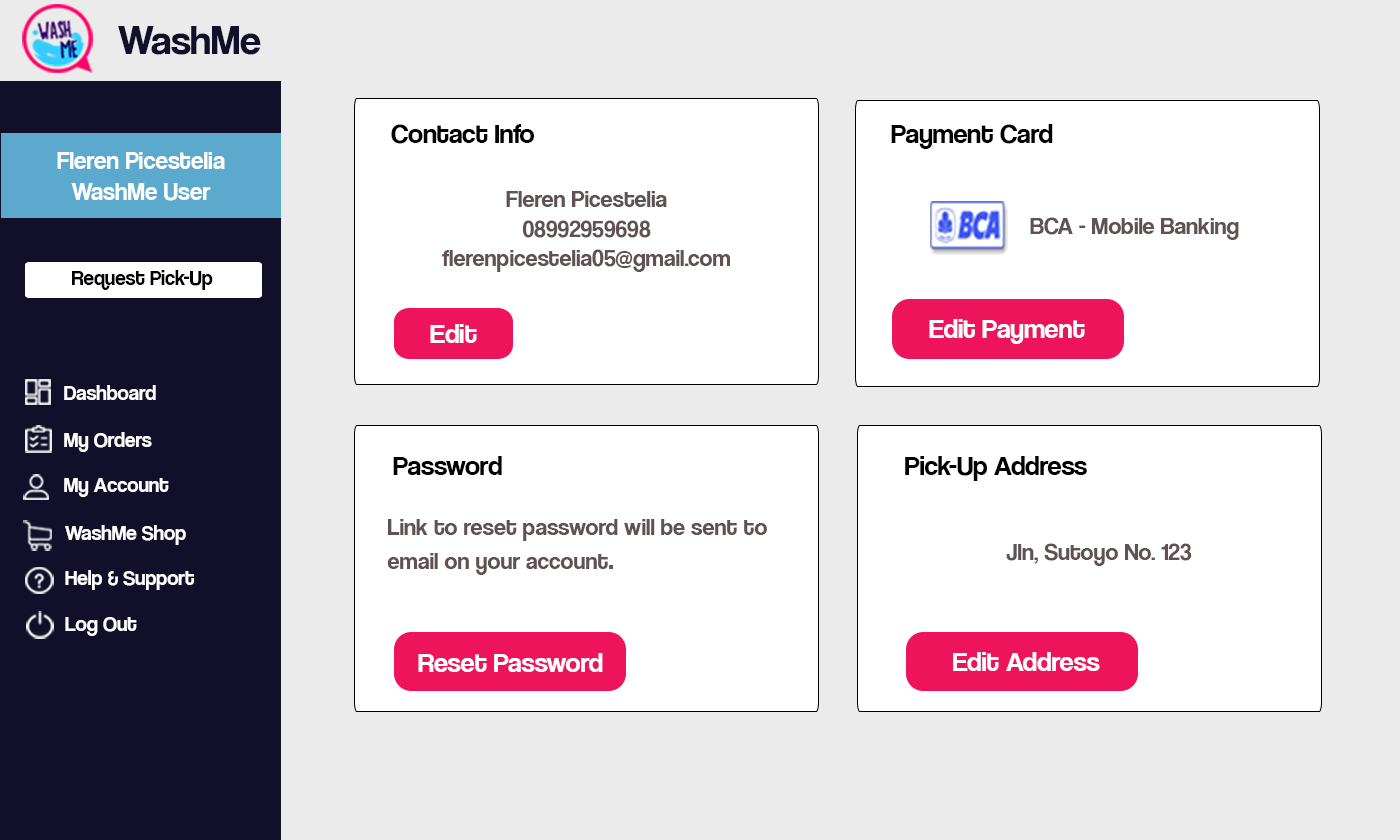
<style>
.page{position:relative;width:1400px;height:840px;background:#ffffff}
.page>*{position:absolute;margin:0}
.t1{font:42px "CoolveticaRg-Regular";color:#120f2b}
.t2{font:28px "CoolveticaRg-Regular";color:#000000}
.t3{font:25.2px "CoolveticaRg-Regular";color:#ffffff}
.t4{font:24.5px "CoolveticaRg-Regular";color:#605252}
.t5{font:21px "CoolveticaRg-Regular";color:#000000}
.t6{font:28px "CoolveticaRg-Regular";color:#ffffff}
.t7{font:21px "CoolveticaRg-Regular";color:#ffffff}
.t8{font:28px "CoolveticaRg-Regular";color:#605252}
.t9{font:27.9px "CoolveticaRg-Regular";color:#ffffff}
</style>
<div class="page">
<p class="t1" style="left:118px;top:26px;width:143px;height:29px">WashMe</p>
<p class="t2" style="left:391px;top:124px;width:143px;height:20px">Contact Info</p>
<p class="t2" style="left:891px;top:124px;width:162px;height:25px">Payment Card</p>
<p class="t3" style="left:57px;top:152px;width:168px;height:49px;text-align:center">Fleren Picestelia<br>WashMe User</p>
<p class="t4" style="left:442px;top:191px;width:288px;height:81px;text-align:center">Fleren Picestelia<br>08992959698<br>flerenpicestelia05@gmail.com</p>
<p class="t4" style="left:1030px;top:217px;width:209px;height:23px">BCA - Mobile Banking</p>
<p class="t5" style="left:72px;top:270px;width:141px;height:20px">Request Pick-Up</p>
<p class="t6" style="left:430px;top:324px;width:47px;height:19px">Edit</p>
<p class="t6" style="left:929px;top:319px;width:156px;height:25px">Edit Payment</p>
<p class="t7" style="left:64px;top:385px;width:92px;height:15px">Dashboard</p>
<p class="t7" style="left:64px;top:432px;width:88px;height:20px">My Orders</p>
<p class="t2" style="left:393px;top:456px;width:109px;height:19px">Password</p>
<p class="t2" style="left:905px;top:456px;width:182px;height:25px">Pick-Up Address</p>
<p class="t7" style="left:64px;top:478px;width:105px;height:19px">My Account</p>
<p class="t4" style="left:387px;top:519px;width:380px;height:56px">Link to reset password will be sent to <br>email on your account<span class="t8">.</span></p>
<p class="t7" style="left:65px;top:525px;width:121px;height:20px">WashMe Shop</p>
<p class="t4" style="left:1006px;top:543px;width:186px;height:23px">Jln, Sutoyo No. 123</p>
<p class="t7" style="left:65px;top:570px;width:129px;height:20px">Help &amp; Support</p>
<p class="t7" style="left:65px;top:617px;width:72px;height:19px">Log Out</p>
<p class="t6" style="left:418px;top:653px;width:185px;height:19px">Reset Password</p>
<p class="t9" style="left:953px;top:652px;width:147px;height:19px">Edit Address</p>
</div>
